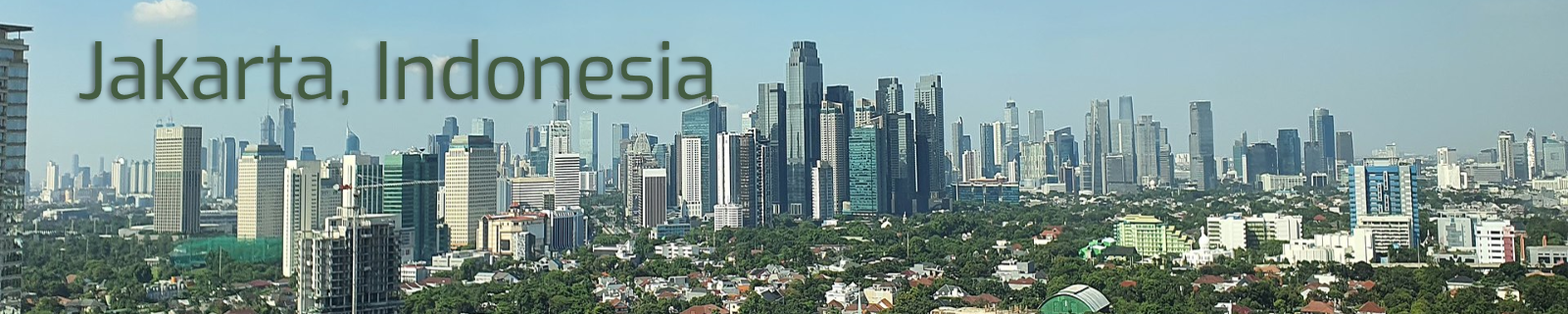
<style>
.page{position:relative;width:1568px;height:314px}
.page>*{position:absolute;margin:0}
.t1{font:78.4px "Exo-Regular";color:#445c41}
</style>
<div class="page">
<p class="t1" style="left:79px;top:38px;width:633px;height:68px">Jakarta, Indonesia</p>
</div>
